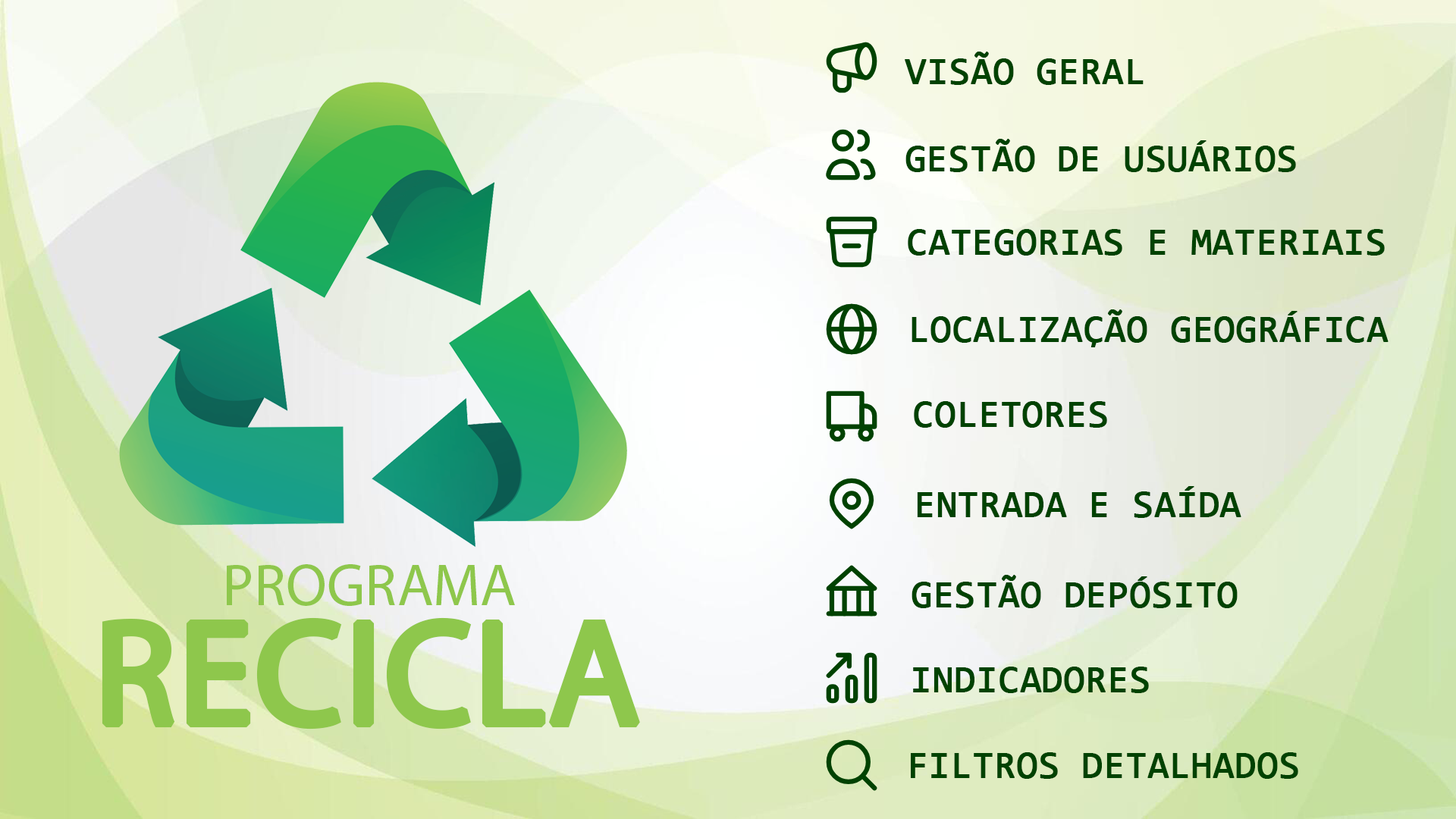
<style>
.page{position:relative;width:1456px;height:819px}
.page>*{position:absolute;margin:0}
.t1{font:37.9px "Consolas";color:#004201;font-weight:bold}
</style>
<div class="page">
<p class="t1" style="left:905px;top:52px;width:239px;height:33px">VISÃO GERAL</p>
<p class="t1" style="left:905px;top:139px;width:391px;height:33px">GESTÃO DE USUÁRIOS</p>
<p class="t1" style="left:908px;top:229px;width:477px;height:27px">CATEGORIAS E MATERIAIS</p>
<p class="t1" style="left:912px;top:309px;width:476px;height:38px">LOCALIZAÇÃO GEOGRÁFICA</p>
<p class="t1" style="left:914px;top:401px;width:193px;height:27px">COLETORES</p>
<p class="t1" style="left:917px;top:486px;width:324px;height:32px">ENTRADA E SAÍDA</p>
<p class="t1" style="left:912px;top:575px;width:326px;height:33px">GESTÃO DEPÓSITO</p>
<p class="t1" style="left:913px;top:667px;width:236px;height:26px">INDICADORES</p>
<p class="t1" style="left:911px;top:752px;width:387px;height:27px">FILTROS DETALHADOS</p>
</div>
